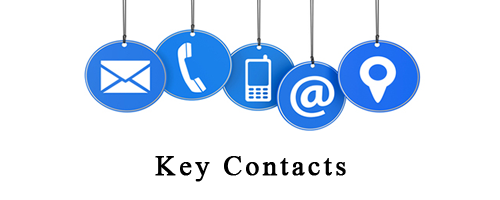
<style>
.page{position:relative;width:500px;height:200px;background:#ffffff}
.page>*{position:absolute;margin:0}
.t1{font:28px "TimesNewRomanPSMT";letter-spacing:0.1em;color:#000000;font-weight:bold}
</style>
<div class="page">
<p class="t1" style="left:155px;top:156px;width:191px;height:26px">Key Contacts</p>
</div>
